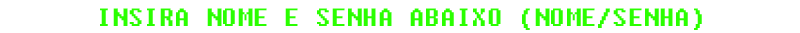
<style>
.page{position:relative;width:800px;height:33px;background:#ffffff}
.page>*{position:absolute;margin:0}
.t1{font:25px "Fixedsys";color:#2aff00}
</style>
<div class="page">
<p class="t1" style="left:100px;top:8px;width:602px;height:22px">INSIRA NOME E SENHA ABAIXO (NOME/SENHA)</p>
</div>
